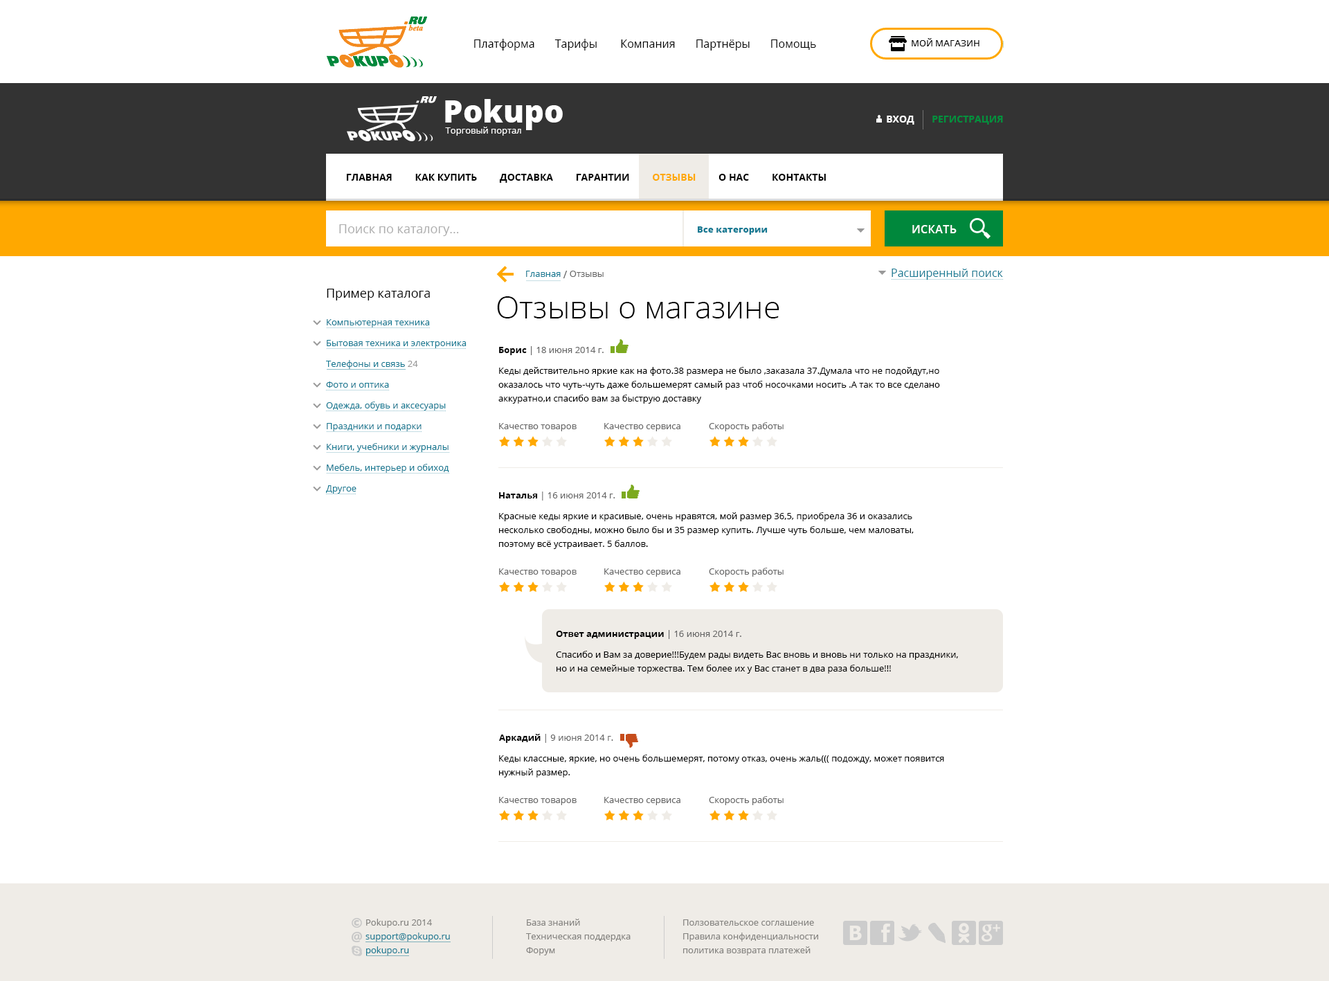
<style>
.page{position:relative;width:1329px;height:981px;background:#ffffff}
.page>*{position:absolute;margin:0}
.t1{font:11.1px "OpenSans";color:#010101}
.t2{font:9px "OpenSans";color:#ffffff}
.t3{font:31.2px "OpenSans-Extrabold";color:#ffffff}
.t4{font:9.7px "OpenSans-Bold";color:#02903d;text-transform:uppercase}
.t5{font:9.7px "OpenSans-Bold";color:#ffffff;text-transform:uppercase}
.t6{font:9.7px "OpenSans-Bold";color:#000000;text-transform:uppercase}
.t7{font:9.7px "OpenSans-Bold";color:#ffa800;text-transform:uppercase}
.t8{font:12.5px "OpenSans";color:#adadad}
.t9{font:9px "OpenSans-Extrabold";color:#177a93}
.t10{font:11.1px "OpenSans-Semibold";letter-spacing:0.025em;color:#ffffff;text-transform:uppercase}
.t11{font:11.1px "OpenSans";color:#177a93}
.t12{font:9px "OpenSans";color:#177a93}
.t13{font:10.4px "OpenSans";color:#666666}
.t14{font:9px "OpenSans";color:#666666}
.t15{font:12.5px "OpenSans";color:#000000}
.t16{font:31.2px "OpenSans-Light";color:#000000}
.t17{font:9px/20.8px "OpenSans";color:#177a93}
.t18{font:9px/20.8px "OpenSans";color:#999999}
.t19{font:9px "OpenSans-Bold";color:#010101}
.t20{font:9px/13.8px "OpenSans";color:#000000}
</style>
<div class="page">
<p class="t1" style="left:474px;top:39px;width:342px;height:12px">Платформа       Тарифы        Компания       Партнёры       Помощь</p>
<p class="t2" style="left:445px;top:99px;width:118px;height:37px"><span class="t3">Pokupo<br> </span>Торговый портал</p>
<p class="t4" style="left:887px;top:116px;width:116px;height:9px"><span class="t5">Вход       </span>регистрация</p>
<p class="t6" style="left:346px;top:174px;width:480px;height:9px">ГЛАВНАЯ         Как купить         Доставка         Гарантии         <span class="t7">Отзывы</span>         О нас         Контакты</p>
<p class="t8" style="left:339px;top:224px;width:120px;height:12px">Поиск по каталогу...</p>
<p class="t9" style="left:698px;top:226px;width:70px;height:9px">Все категории</p>
<p class="t10" style="left:912px;top:225px;width:45px;height:8px">искать</p>
<p class="t11" style="left:892px;top:269px;width:111px;height:11px">Расширенный поиск</p>
<p class="t12" style="left:526px;top:271px;width:78px;height:7px">Главная <span class="t13">/</span><span class="t14"> Отзывы</span></p>
<p class="t15" style="left:327px;top:289px;width:103px;height:11px">Пример каталога</p>
<p class="t16" style="left:497px;top:296px;width:283px;height:22px">Отзывы о магазине</p>
<p class="t17" style="left:326px;top:319px;width:141px;height:175px">Компьютерная техника<br>Бытовая техника и электроника<br>Телефоны и связь<span class="t18"> 24<br></span>Фото и оптика<br>Одежда, обувь и аксесуары<br>Праздники и подарки<br>Книги, учебники и журналы<br>Мебель, интерьер и обиход<br>Другое</p>
<p class="t14" style="left:499px;top:346px;width:105px;height:9px"><span class="t19">Борис</span> | 18 июня 2014 г.</p>
<p class="t20" style="left:498px;top:367px;width:442px;height:37px">Кеды действительно яркие как на фото.38 размера не было ,заказала 37.Думала что не подойдут,но оказалось что чуть-чуть даже большемерят самый раз чтоб носочками носить .А так то все сделано аккуратно,и спасибо вам за быструю доставку</p>
<p class="t14" style="left:499px;top:423px;width:78px;height:8px">Качество товаров</p>
<p class="t14" style="left:604px;top:423px;width:77px;height:8px">Качество сервиса</p>
<p class="t14" style="left:709px;top:422px;width:75px;height:9px">Скорость работы</p>
<p class="t14" style="left:499px;top:492px;width:116px;height:9px"><span class="t19">Наталья</span> | 16 июня 2014 г.</p>
<p class="t20" style="left:499px;top:512px;width:415px;height:37px">Красные кеды яркие и красивые, очень нравятся, мой размер 36,5, приобрела 36 и оказались несколько свободны, можно было бы и 35 размер купить. Лучше чуть больше, чем маловаты, поэтому всё устраивает. 5 баллов.</p>
<p class="t14" style="left:499px;top:568px;width:78px;height:9px">Качество товаров</p>
<p class="t14" style="left:604px;top:568px;width:77px;height:9px">Качество сервиса</p>
<p class="t14" style="left:709px;top:568px;width:75px;height:9px">Скорость работы</p>
<p class="t19" style="left:556px;top:630px;width:185px;height:9px">Ответ администрации<span class="t14"> | 16 июня 2014 г.</span></p>
<p class="t20" style="left:556px;top:651px;width:402px;height:23px">Спасибо и Вам за доверие!!!Будем рады видеть Вас вновь и вновь ни только на праздники, <br>но и на семейные торжества. Тем более их у Вас станет в два раза больше!!!</p>
<p class="t14" style="left:499px;top:734px;width:114px;height:9px"><span class="t19">Аркадий</span> | 9 июня 2014 г.</p>
<p class="t20" style="left:499px;top:755px;width:445px;height:22px">Кеды классные, яркие, но очень большемерят, потому отказ, очень жаль((( подожду, может появится нужный размер.</p>
<p class="t14" style="left:499px;top:797px;width:78px;height:8px">Качество товаров</p>
<p class="t14" style="left:604px;top:797px;width:77px;height:8px">Качество сервиса</p>
<p class="t14" style="left:709px;top:796px;width:75px;height:9px">Скорость работы</p>
</div>
